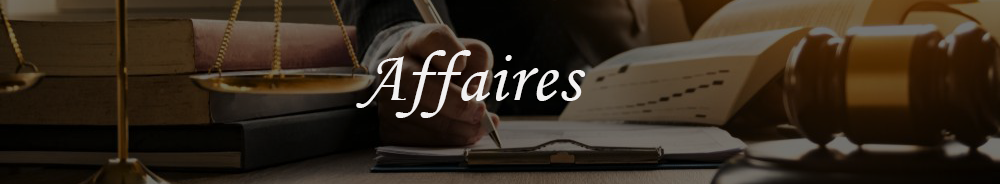
<style>
.page{position:relative;width:1000px;height:184px}
.page>*{position:absolute;margin:0}
.t1{font:72px "MonotypeCorsiva";letter-spacing:0.025em;color:#f3f1f1}
</style>
<div class="page">
<p class="t1" style="left:356px;top:50px;width:230px;height:68px">Affaires</p>
</div>
